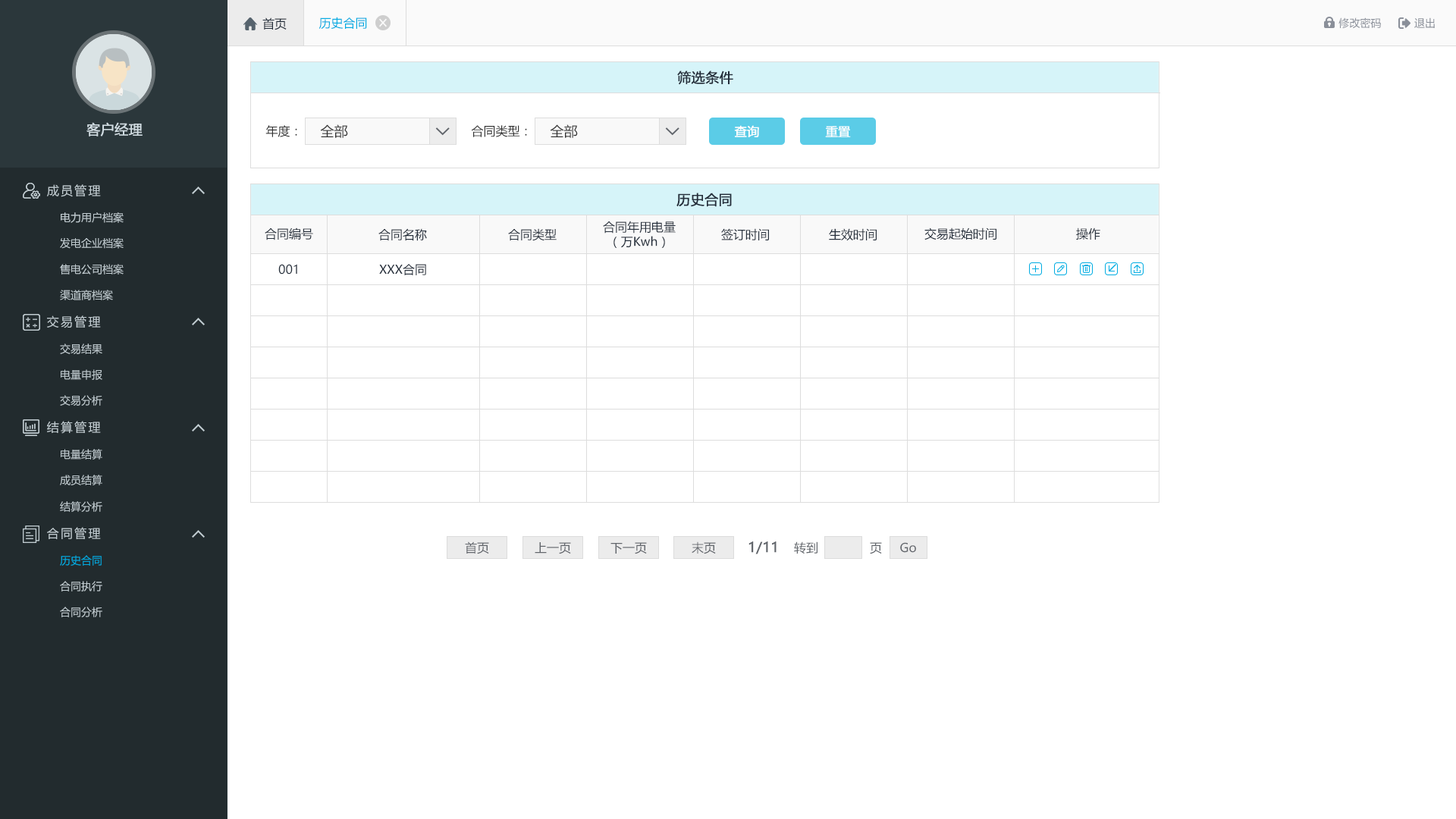
<style>
.page{position:relative;width:1456px;height:819px;background:#ffffff}
.page>*{position:absolute;margin:0}
.t1{font:12.1px "MicrosoftYaHei";color:#242e3b}
.t2{font:12.1px "MicrosoftYaHei";color:#00ace2}
.t3{font:10.6px "MicrosoftYaHei";color:#8a8f99}
.t4{font:13.6px "MicrosoftYaHei";color:#242e3b;font-weight:bold}
.t5{font:13.6px "MicrosoftYaHei";color:#d1dce2;font-weight:bold}
.t6{font:12.1px "MicrosoftYaHei";color:#333333}
.t7{font:13.6px "MicrosoftYaHei";color:#333333}
.t8{font:12.1px "MicrosoftYaHei";color:#ffffff;font-weight:bold}
.t9{font:12.1px "MicrosoftYaHei";letter-spacing:0.14em;color:#c2cdd2}
.t10{font:10.6px "MicrosoftYaHei";color:#c2cdd2}
.t11{font:12.1px "MicrosoftYaHei";color:#61656b}
.t12{font:13.6px "MicrosoftYaHei";color:#61656b;font-weight:bold}
.t13{font:10.6px "MicrosoftYaHei";color:#00ace2}
</style>
<div class="page">
<p class="t1" style="left:262px;top:17px;width:25px;height:13px">首页</p>
<p class="t2" style="left:318px;top:17px;width:49px;height:12px">历史合同</p>
<p class="t3" style="left:1338px;top:17px;width:43px;height:12px">修改密码</p>
<p class="t3" style="left:1414px;top:17px;width:21px;height:11px">退出</p>
<p class="t4" style="left:677px;top:71px;width:56px;height:14px">筛选条件</p>
<p class="t5" style="left:86px;top:122px;width:57px;height:14px">客户经理</p>
<p class="t6" style="left:265px;top:125px;width:32px;height:12px">年度：</p>
<p class="t7" style="left:320px;top:124px;width:28px;height:14px">全部</p>
<p class="t6" style="left:471px;top:125px;width:56px;height:12px">合同类型：</p>
<p class="t7" style="left:550px;top:124px;width:28px;height:14px">全部</p>
<p class="t8" style="left:734px;top:125px;width:25px;height:12px">查询</p>
<p class="t8" style="left:825px;top:126px;width:26px;height:11px">重置</p>
<p class="t9" style="left:47px;top:184px;width:54px;height:13px">成员管理</p>
<p class="t4" style="left:676px;top:193px;width:56px;height:14px">历史合同</p>
<p class="t10" style="left:61px;top:212px;width:63px;height:11px">电力用户档案</p>
<p class="t1" style="left:603px;top:221px;width:73px;height:27px;text-align:center">合同年用电量<br>（万Kwh）</p>
<p class="t1" style="left:265px;top:227px;width:48px;height:13px">合同编号</p>
<p class="t1" style="left:378px;top:228px;width:49px;height:13px">合同名称</p>
<p class="t1" style="left:508px;top:228px;width:49px;height:13px">合同类型</p>
<p class="t1" style="left:721px;top:228px;width:48px;height:12px">签订时间</p>
<p class="t1" style="left:829px;top:228px;width:48px;height:13px">生效时间</p>
<p class="t1" style="left:924px;top:227px;width:72px;height:13px">交易起始时间</p>
<p class="t1" style="left:1076px;top:227px;width:24px;height:13px">操作</p>
<p class="t10" style="left:60px;top:237px;width:64px;height:12px">发电企业档案</p>
<p class="t10" style="left:60px;top:264px;width:64px;height:11px">售电公司档案</p>
<p class="t1" style="left:278px;top:264px;width:19px;height:11px">001</p>
<p class="t1" style="left:379px;top:264px;width:47px;height:11px">XXX合同</p>
<p class="t10" style="left:60px;top:290px;width:53px;height:10px">渠道商档案</p>
<p class="t9" style="left:47px;top:315px;width:54px;height:13px">交易管理</p>
<p class="t10" style="left:60px;top:344px;width:42px;height:10px">交易结果</p>
<p class="t10" style="left:61px;top:369px;width:41px;height:11px">电量申报</p>
<p class="t10" style="left:60px;top:395px;width:42px;height:11px">交易分析</p>
<p class="t9" style="left:47px;top:421px;width:54px;height:13px">结算管理</p>
<p class="t10" style="left:61px;top:449px;width:41px;height:11px">电量结算</p>
<p class="t10" style="left:60px;top:475px;width:42px;height:10px">成员结算</p>
<p class="t10" style="left:60px;top:501px;width:42px;height:11px">结算分析</p>
<p class="t9" style="left:47px;top:527px;width:54px;height:12px">合同管理</p>
<p class="t11" style="left:465px;top:541px;width:24px;height:13px">首页</p>
<p class="t11" style="left:535px;top:542px;width:36px;height:12px">上一页</p>
<p class="t11" style="left:610px;top:542px;width:37px;height:12px">下一页</p>
<p class="t11" style="left:692px;top:541px;width:24px;height:13px">末页</p>
<p class="t12" style="left:748px;top:541px;width:29px;height:13px">1/11</p>
<p class="t11" style="left:794px;top:541px;width:23px;height:13px">转到</p>
<p class="t11" style="left:870px;top:542px;width:12px;height:12px">页</p>
<p class="t11" style="left:900px;top:542px;width:16px;height:11px">Go</p>
<p class="t13" style="left:60px;top:555px;width:42px;height:11px">历史合同</p>
<p class="t10" style="left:60px;top:581px;width:42px;height:10px">合同执行</p>
<p class="t10" style="left:60px;top:607px;width:42px;height:10px">合同分析</p>
</div>
